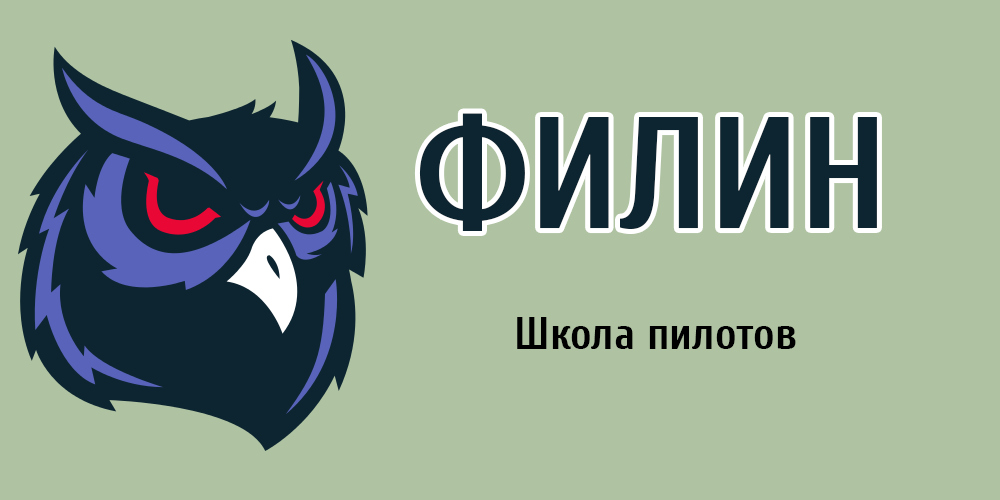
<style>
.page{position:relative;width:1000px;height:500px;background:#afc3a2}
.page>*{position:absolute;margin:0}
.t1{font:159px "Cuprum-Bold";color:#0d2531}
.t2{font:45px "Cuprum-Bold";color:#000000}
</style>
<div class="page">
<p class="t1" style="left:419px;top:113px;width:458px;height:118px">ФИЛИН</p>
<p class="t2" style="left:517px;top:317px;width:279px;height:32px">Школа пилотов</p>
</div>
